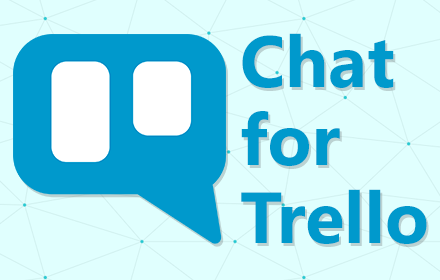
<style>
.page{position:relative;width:440px;height:280px;background:#e0fffe}
.page>*{position:absolute;margin:0}
.t1{font:72px/78px "SegoeUI-Bold";color:#0099cc}
</style>
<div class="page">
<p class="t1" style="left:241px;top:33px;width:186px;height:211px">Chat<br>for <br>Trello</p>
</div>
